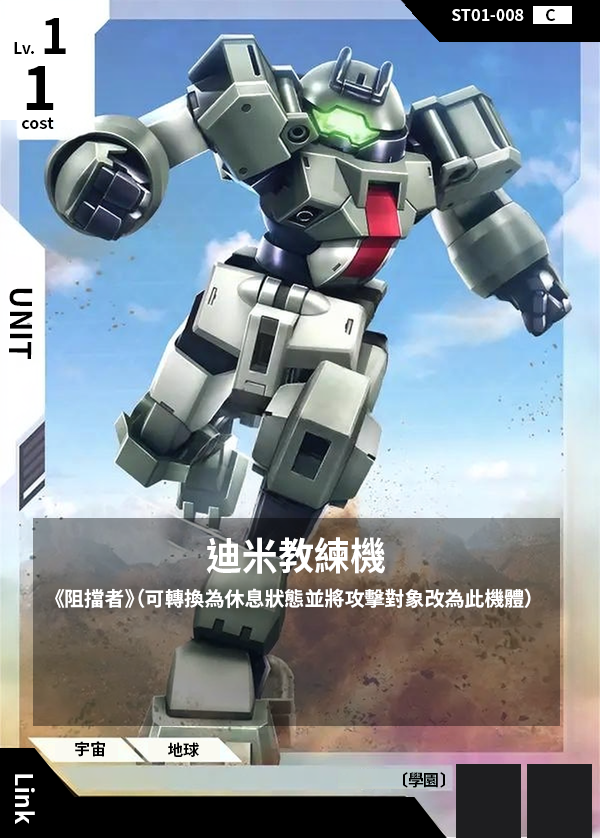
<style>
.page{position:relative;width:600px;height:838px}
.page>*{position:absolute;margin:0}
.t1{font:16px "NotoSansCJKtc-Bold";color:#ffffff}
.t2{font:16px "NotoSansCJKtc-Bold";color:#000000}
.t3{font:48px "NotoSansCJKtc-Bold";color:#000000}
.t4{font:60px "NotoSansCJKtc-Bold";color:#000000}
.t5{font:30px "NotoSansCJKtc-Bold";color:#000000}
.t6{font:38.4px "NotoSansCJKtc-Bold";color:#ffffff;scale:0.94 1}
.t7{font:20px "NotoSansCJKtc-Bold";color:#ffffff}
.t8{font:24px "NotoSansCJKtc-Bold";color:#ffffff}
</style>
<div class="page">
<p class="t1" style="left:452px;top:9px;width:72px;height:12px">ST01-008</p>
<p class="t2" style="left:546px;top:9px;width:10px;height:12px">C</p>
<p class="t3" style="left:44px;top:18px;width:22px;height:36px">1</p>
<p class="t2" style="left:14px;top:42px;width:20px;height:12px">Lv.</p>
<p class="t4" style="left:26px;top:66px;width:28px;height:44px">1</p>
<p class="t2" style="left:22px;top:117px;width:32px;height:12px">cost</p>
<p class="t5" style="left:9px;top:288px;width:24px;height:71px;rotate:90deg">UNIT</p>
<p class="t6" style="left:206px;top:537px;width:179px;height:37px">迪米教練機</p>
<p class="t7" style="left:55px;top:588px;width:476px;height:21px">《阻擋者》（可轉換為休息狀態並將攻擊對象改為此機體）</p>
<p class="t2" style="left:75px;top:741px;width:30px;height:16px">宇宙</p>
<p class="t2" style="left:168px;top:742px;width:31px;height:15px">地球</p>
<p class="t8" style="left:15px;top:774px;width:20px;height:50px;rotate:90deg">Link</p>
<p class="t2" style="left:403px;top:772px;width:42px;height:16px">〔學園〕</p>
</div>
